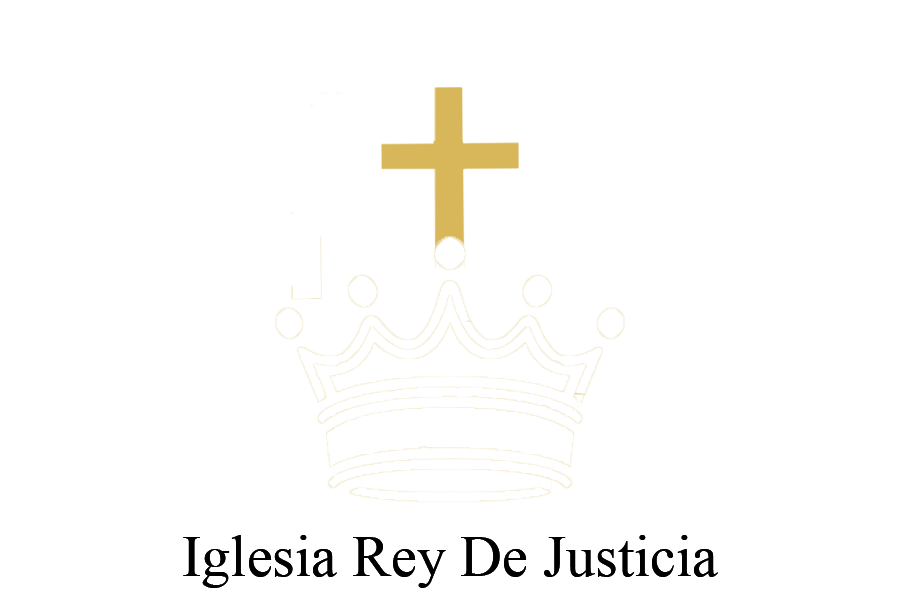
<style>
.page{position:relative;width:900px;height:600px;background:#ffffff}
.page>*{position:absolute;margin:0}
.t1{font:58.3px "TimesNewRomanPSMT";color:#000000}
</style>
<div class="page">
<p class="t1" style="left:183px;top:535px;width:535px;height:53px">Iglesia Rey De Justicia</p>
<p class="t1" style="left:183px;top:535px;width:535px;height:53px">Iglesia Rey De Justicia</p>
</div>
